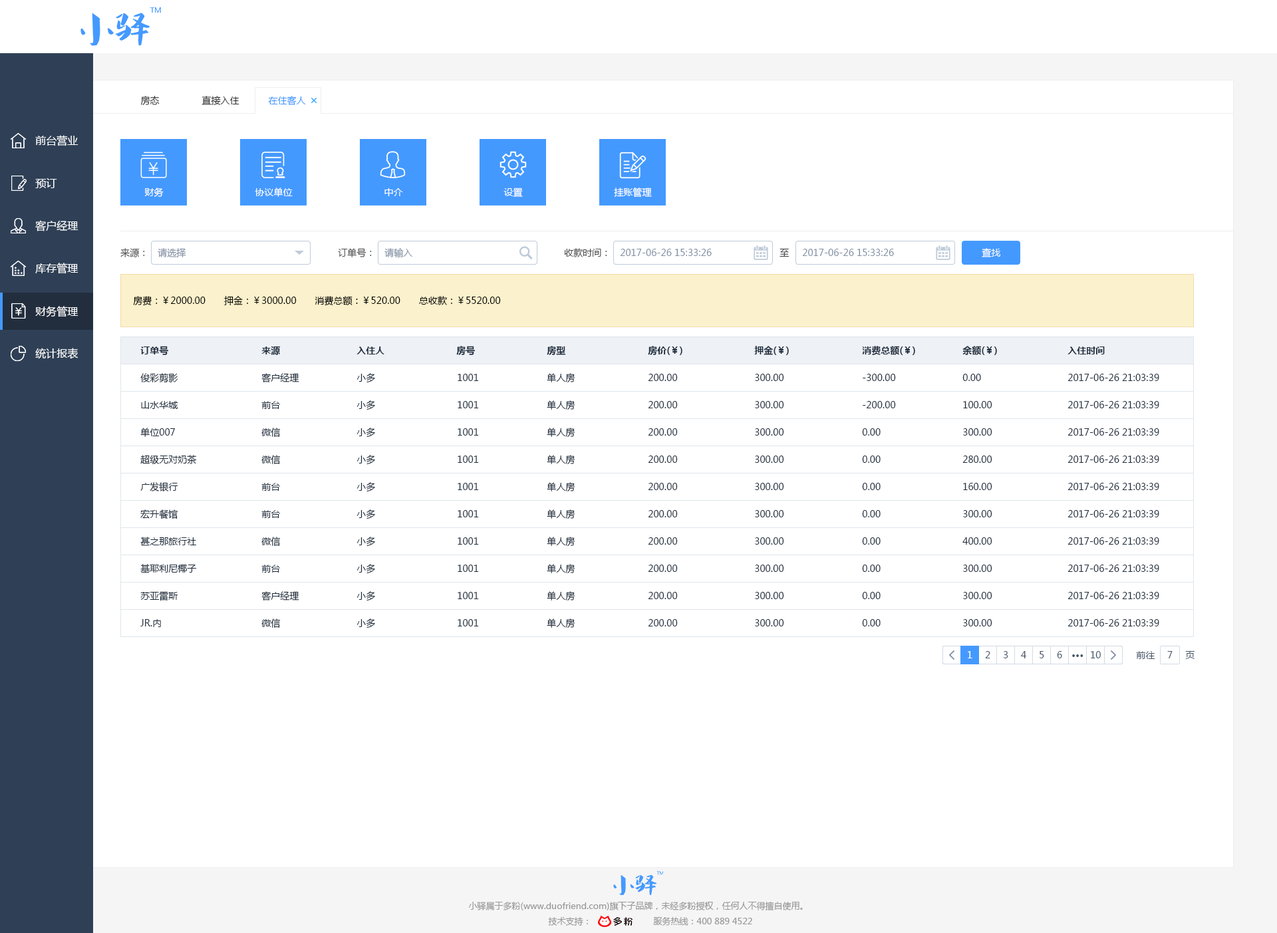
<style>
.page{position:relative;width:1277px;height:933px;background:#ffffff}
.page>*{position:absolute;margin:0}
.t1{font:9.3px "MicrosoftYaHei";color:#333333}
.t2{font:9.3px "MicrosoftYaHei";color:#4499ff}
.t3{font:10.6px "MicrosoftYaHei";color:#ffffff}
.t4{font:9.3px "MicrosoftYaHei";color:#ffffff}
.t5{font:9.3px "MicrosoftYaHei";color:#505050}
.t6{font:9.3px "MicrosoftYaHei";color:#8391a5}
.t7{font:9.3px "MicrosoftYaHei";color:#000000}
.t8{font:9.3px "MicrosoftYaHei-Bold";color:#1f2d3d}
.t9{font:9.3px "MicrosoftYaHei";color:#1f2d3d}
.t10{font:9.3px "MicrosoftYaHei";color:#48576a}
.t11{font:9.3px "MicrosoftYaHei-Bold";color:#48576a}
.t12{font:8.6px "MicrosoftYaHei";color:#999999}
</style>
<div class="page">
<p class="t1" style="left:140px;top:96px;width:20px;height:9px">房态</p>
<p class="t1" style="left:202px;top:96px;width:38px;height:9px">直接入住</p>
<p class="t2" style="left:268px;top:96px;width:38px;height:9px">在住客人</p>
<p class="t3" style="left:35px;top:135px;width:44px;height:11px">前台营业</p>
<p class="t3" style="left:35px;top:178px;width:22px;height:10px">预订</p>
<p class="t4" style="left:144px;top:188px;width:20px;height:9px">财务</p>
<p class="t4" style="left:255px;top:188px;width:38px;height:9px">协议单位</p>
<p class="t4" style="left:385px;top:188px;width:18px;height:8px">中介</p>
<p class="t4" style="left:504px;top:188px;width:19px;height:9px">设置</p>
<p class="t4" style="left:614px;top:188px;width:38px;height:10px">挂账管理</p>
<p class="t3" style="left:35px;top:220px;width:44px;height:12px">客户经理</p>
<p class="t5" style="left:120px;top:248px;width:25px;height:9px">来源：</p>
<p class="t6" style="left:158px;top:248px;width:28px;height:9px">请选择</p>
<p class="t5" style="left:338px;top:248px;width:34px;height:9px">订单号：</p>
<p class="t6" style="left:385px;top:248px;width:28px;height:10px">请输入</p>
<p class="t5" style="left:564px;top:248px;width:43px;height:9px">收款时间：</p>
<p class="t6" style="left:620px;top:249px;width:92px;height:7px">2017-06-26 15:33:26</p>
<p class="t5" style="left:780px;top:248px;width:10px;height:9px">至</p>
<p class="t6" style="left:802px;top:249px;width:92px;height:7px">2017-06-26 15:33:26</p>
<p class="t4" style="left:982px;top:248px;width:19px;height:9px">查找</p>
<p class="t3" style="left:35px;top:263px;width:44px;height:11px">库存管理</p>
<p class="t7" style="left:133px;top:296px;width:368px;height:10px">房费：￥2000.00　　押金：￥3000.00　　消费总额：￥520.00　　总收款：￥5520.00</p>
<p class="t3" style="left:35px;top:306px;width:44px;height:11px">财务管理</p>
<p class="t3" style="left:35px;top:348px;width:44px;height:11px">统计报表</p>
<p class="t8" style="left:140px;top:346px;width:28px;height:9px">订单号</p>
<p class="t8" style="left:261px;top:346px;width:19px;height:9px">来源</p>
<p class="t8" style="left:357px;top:347px;width:28px;height:8px">入住人</p>
<p class="t8" style="left:456px;top:346px;width:19px;height:9px">房号</p>
<p class="t8" style="left:547px;top:346px;width:19px;height:9px">房型</p>
<p class="t8" style="left:648px;top:346px;width:35px;height:9px">房价(￥)</p>
<p class="t8" style="left:754px;top:346px;width:35px;height:9px">押金(￥)</p>
<p class="t8" style="left:862px;top:346px;width:53px;height:9px">消费总额(￥)</p>
<p class="t8" style="left:963px;top:346px;width:34px;height:9px">余额(￥)</p>
<p class="t8" style="left:1068px;top:347px;width:37px;height:8px">入住时间</p>
<p class="t9" style="left:140px;top:373px;width:38px;height:10px">俊彩剪影</p>
<p class="t9" style="left:261px;top:373px;width:38px;height:10px">客户经理</p>
<p class="t9" style="left:357px;top:373px;width:18px;height:10px">小多</p>
<p class="t9" style="left:458px;top:374px;width:21px;height:7px">1001</p>
<p class="t9" style="left:547px;top:373px;width:29px;height:10px">单人房</p>
<p class="t9" style="left:648px;top:374px;width:30px;height:7px">200.00</p>
<p class="t9" style="left:755px;top:374px;width:29px;height:7px">300.00</p>
<p class="t9" style="left:863px;top:374px;width:33px;height:7px">-300.00</p>
<p class="t9" style="left:963px;top:374px;width:18px;height:7px">0.00</p>
<p class="t9" style="left:1068px;top:374px;width:92px;height:7px">2017-06-26 21:03:39</p>
<p class="t9" style="left:141px;top:401px;width:37px;height:8px">山水华城</p>
<p class="t9" style="left:261px;top:401px;width:19px;height:8px">前台</p>
<p class="t9" style="left:357px;top:401px;width:18px;height:10px">小多</p>
<p class="t9" style="left:458px;top:401px;width:21px;height:8px">1001</p>
<p class="t9" style="left:547px;top:401px;width:29px;height:10px">单人房</p>
<p class="t9" style="left:648px;top:401px;width:30px;height:8px">200.00</p>
<p class="t9" style="left:755px;top:401px;width:29px;height:8px">300.00</p>
<p class="t9" style="left:863px;top:401px;width:33px;height:8px">-200.00</p>
<p class="t9" style="left:963px;top:401px;width:30px;height:8px">100.00</p>
<p class="t9" style="left:1068px;top:401px;width:92px;height:8px">2017-06-26 21:03:39</p>
<p class="t9" style="left:140px;top:428px;width:35px;height:9px">单位007</p>
<p class="t9" style="left:261px;top:428px;width:20px;height:9px">微信</p>
<p class="t9" style="left:357px;top:428px;width:18px;height:10px">小多</p>
<p class="t9" style="left:458px;top:428px;width:21px;height:8px">1001</p>
<p class="t9" style="left:547px;top:428px;width:29px;height:10px">单人房</p>
<p class="t9" style="left:648px;top:428px;width:30px;height:8px">200.00</p>
<p class="t9" style="left:755px;top:428px;width:29px;height:8px">300.00</p>
<p class="t9" style="left:862px;top:428px;width:19px;height:8px">0.00</p>
<p class="t9" style="left:963px;top:428px;width:30px;height:8px">300.00</p>
<p class="t9" style="left:1068px;top:428px;width:92px;height:8px">2017-06-26 21:03:39</p>
<p class="t9" style="left:140px;top:455px;width:57px;height:9px">超级无对奶茶</p>
<p class="t9" style="left:261px;top:455px;width:20px;height:9px">微信</p>
<p class="t9" style="left:357px;top:455px;width:18px;height:10px">小多</p>
<p class="t9" style="left:458px;top:456px;width:21px;height:7px">1001</p>
<p class="t9" style="left:547px;top:455px;width:29px;height:10px">单人房</p>
<p class="t9" style="left:648px;top:456px;width:30px;height:7px">200.00</p>
<p class="t9" style="left:755px;top:456px;width:29px;height:7px">300.00</p>
<p class="t9" style="left:862px;top:456px;width:19px;height:7px">0.00</p>
<p class="t9" style="left:963px;top:456px;width:30px;height:7px">280.00</p>
<p class="t9" style="left:1068px;top:456px;width:92px;height:7px">2017-06-26 21:03:39</p>
<p class="t9" style="left:140px;top:482px;width:38px;height:10px">广发银行</p>
<p class="t9" style="left:261px;top:483px;width:19px;height:8px">前台</p>
<p class="t9" style="left:357px;top:482px;width:18px;height:10px">小多</p>
<p class="t9" style="left:458px;top:483px;width:21px;height:7px">1001</p>
<p class="t9" style="left:547px;top:482px;width:29px;height:10px">单人房</p>
<p class="t9" style="left:648px;top:483px;width:30px;height:7px">200.00</p>
<p class="t9" style="left:755px;top:483px;width:29px;height:7px">300.00</p>
<p class="t9" style="left:862px;top:483px;width:19px;height:7px">0.00</p>
<p class="t9" style="left:963px;top:483px;width:30px;height:7px">160.00</p>
<p class="t9" style="left:1068px;top:483px;width:92px;height:7px">2017-06-26 21:03:39</p>
<p class="t9" style="left:140px;top:510px;width:38px;height:10px">宏升餐馆</p>
<p class="t9" style="left:357px;top:510px;width:18px;height:10px">小多</p>
<p class="t9" style="left:547px;top:510px;width:29px;height:10px">单人房</p>
<p class="t9" style="left:261px;top:510px;width:19px;height:8px">前台</p>
<p class="t9" style="left:458px;top:510px;width:21px;height:8px">1001</p>
<p class="t9" style="left:648px;top:510px;width:30px;height:8px">200.00</p>
<p class="t9" style="left:755px;top:510px;width:29px;height:8px">300.00</p>
<p class="t9" style="left:862px;top:510px;width:19px;height:8px">0.00</p>
<p class="t9" style="left:963px;top:510px;width:30px;height:8px">300.00</p>
<p class="t9" style="left:1068px;top:510px;width:92px;height:8px">2017-06-26 21:03:39</p>
<p class="t9" style="left:140px;top:537px;width:56px;height:9px">甚之那旅行社</p>
<p class="t9" style="left:261px;top:537px;width:20px;height:9px">微信</p>
<p class="t9" style="left:357px;top:537px;width:18px;height:10px">小多</p>
<p class="t9" style="left:458px;top:538px;width:21px;height:7px">1001</p>
<p class="t9" style="left:547px;top:537px;width:29px;height:10px">单人房</p>
<p class="t9" style="left:648px;top:538px;width:30px;height:7px">200.00</p>
<p class="t9" style="left:755px;top:538px;width:29px;height:7px">300.00</p>
<p class="t9" style="left:862px;top:538px;width:19px;height:7px">0.00</p>
<p class="t9" style="left:963px;top:538px;width:30px;height:7px">400.00</p>
<p class="t9" style="left:1068px;top:538px;width:92px;height:7px">2017-06-26 21:03:39</p>
<p class="t9" style="left:140px;top:564px;width:57px;height:10px">基耶利尼椰子</p>
<p class="t9" style="left:261px;top:565px;width:19px;height:8px">前台</p>
<p class="t9" style="left:357px;top:564px;width:18px;height:10px">小多</p>
<p class="t9" style="left:458px;top:565px;width:21px;height:7px">1001</p>
<p class="t9" style="left:547px;top:564px;width:29px;height:10px">单人房</p>
<p class="t9" style="left:648px;top:565px;width:30px;height:7px">200.00</p>
<p class="t9" style="left:755px;top:565px;width:29px;height:7px">300.00</p>
<p class="t9" style="left:862px;top:565px;width:19px;height:7px">0.00</p>
<p class="t9" style="left:963px;top:565px;width:30px;height:7px">300.00</p>
<p class="t9" style="left:1068px;top:565px;width:92px;height:7px">2017-06-26 21:03:39</p>
<p class="t9" style="left:140px;top:591px;width:38px;height:10px">苏亚雷斯</p>
<p class="t9" style="left:261px;top:591px;width:38px;height:10px">客户经理</p>
<p class="t9" style="left:357px;top:591px;width:18px;height:10px">小多</p>
<p class="t9" style="left:458px;top:592px;width:21px;height:7px">1001</p>
<p class="t9" style="left:547px;top:591px;width:29px;height:10px">单人房</p>
<p class="t9" style="left:648px;top:592px;width:30px;height:7px">200.00</p>
<p class="t9" style="left:755px;top:592px;width:29px;height:7px">300.00</p>
<p class="t9" style="left:862px;top:592px;width:19px;height:7px">0.00</p>
<p class="t9" style="left:963px;top:592px;width:30px;height:7px">300.00</p>
<p class="t9" style="left:1068px;top:592px;width:92px;height:7px">2017-06-26 21:03:39</p>
<p class="t9" style="left:140px;top:619px;width:21px;height:8px">JR.内</p>
<p class="t9" style="left:261px;top:619px;width:20px;height:9px">微信</p>
<p class="t9" style="left:357px;top:619px;width:18px;height:10px">小多</p>
<p class="t9" style="left:458px;top:619px;width:21px;height:8px">1001</p>
<p class="t9" style="left:547px;top:619px;width:29px;height:10px">单人房</p>
<p class="t9" style="left:648px;top:619px;width:30px;height:8px">200.00</p>
<p class="t9" style="left:755px;top:619px;width:29px;height:8px">300.00</p>
<p class="t9" style="left:862px;top:619px;width:19px;height:8px">0.00</p>
<p class="t9" style="left:963px;top:619px;width:30px;height:8px">300.00</p>
<p class="t9" style="left:1068px;top:619px;width:92px;height:8px">2017-06-26 21:03:39</p>
<p class="t4" style="left:968px;top:651px;width:5px;height:8px">1</p>
<p class="t10" style="left:985px;top:651px;width:6px;height:8px">2</p>
<p class="t10" style="left:1003px;top:651px;width:6px;height:8px">3</p>
<p class="t10" style="left:1021px;top:651px;width:6px;height:8px">4</p>
<p class="t10" style="left:1040px;top:651px;width:5px;height:8px">5</p>
<p class="t10" style="left:1057px;top:651px;width:6px;height:8px">6</p>
<p class="t10" style="left:1091px;top:651px;width:10px;height:8px">10</p>
<p class="t10" style="left:1136px;top:651px;width:20px;height:8px">前往</p>
<p class="t10" style="left:1168px;top:651px;width:5px;height:8px">7</p>
<p class="t10" style="left:1186px;top:651px;width:9px;height:8px">页</p>
<p class="t11" style="left:1073px;top:655px;width:11px;height:2px">···</p>
<p class="t12" style="left:468px;top:902px;width:335px;height:9px">小驿属于多粉(www.duofriend.com)旗下子品牌，未经多粉授权，任何人不得擅自使用。</p>
<p class="t12" style="left:548px;top:917px;width:40px;height:9px">技术支持：</p>
<p class="t12" style="left:653px;top:917px;width:99px;height:9px">服务热线：400 889 4522</p>
</div>
